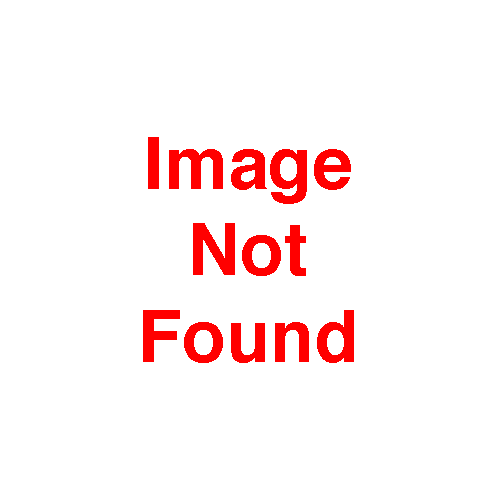
<style>
.page{position:relative;width:500px;height:500px;background:#ffffff}
.page>*{position:absolute;margin:0}
.t1{font:72px "Helvetica-Bold";letter-spacing:0.005em;color:#ff0000}
</style>
<div class="page">
<p class="t1" style="left:143px;top:137px;width:211px;height:226px;text-align:center">Image<br>Not<br>Found</p>
</div>
